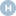
<style>
.page{position:relative;width:16px;height:16px;background:#a5bfd3}
.page>*{position:absolute;margin:0}
.t1{font:9px "NexaBold";letter-spacing:0.025em;color:#ffffff;font-weight:bold}
</style>
<div class="page">
<p class="t1" style="left:5px;top:4px;width:7px;height:8px">H</p>
</div>
